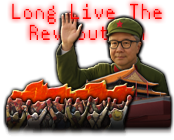
<style>
.page{position:relative;width:174px;height:140px;background:#ffffff}
.page>*{position:absolute;margin:0}
.t1{font:21.9px/21.6px "HYPixel-11px-U";color:#ff0501}
</style>
<div class="page">
<p class="t1" style="left:12px;top:3px;width:150px;height:38px;text-align:center">Long Live The<br>Revloution</p>
</div>
